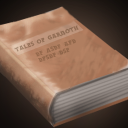
<style>
.page{position:relative;width:128px;height:128px}
.page>*{position:absolute;margin:0}
.t1{font:7.5px "drwnstcr";letter-spacing:0.025em;color:#936e55;scale:0.91 1}
</style>
<div class="page">
<p class="t1" style="left:14px;top:25px;width:65px;height:27px;rotate:-20deg">Tales of Garnoth</p>
</div>
